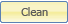
<style>
.page{position:relative;width:68px;height:24px}
.page>*{position:absolute;margin:0}
.t1{font:11px "Tahoma";color:#5b5b5b}
</style>
<div class="page">
<p class="t1" style="left:21px;top:7px;width:27px;height:9px">Clean</p>
</div>
